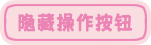
<style>
.page{position:relative;width:151px;height:45px;background:#f9dde0}
.page>*{position:absolute;margin:0}
.t1{font:12px "shetumodengxiaofangti";color:#eb84b4;font-weight:bold;scale:0.94 1}
</style>
<div class="page">
<p class="t1" style="left:18px;top:13px;width:114px;height:19px">隐藏操作按钮</p>
</div>
